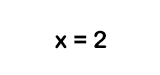
<style>
.page{position:relative;width:160px;height:75px;background:#ffffff}
.page>*{position:absolute;margin:0}
.t1{font:24px "ArialRoundedMTBold";color:#000000}
</style>
<div class="page">
<p class="t1" style="left:55px;top:30px;width:52px;height:19px">x = 2</p>
</div>
